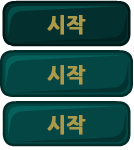
<style>
.page{position:relative;width:134px;height:150px;background:#044643}
.page>*{position:absolute;margin:0}
.t1{font:20px "NanumGothicExtraBold";color:#ab9a4a;font-weight:bold}
</style>
<div class="page">
<p class="t1" style="left:47px;top:15px;width:39px;height:20px">시작</p>
<p class="t1" style="left:47px;top:65px;width:39px;height:20px">시작</p>
<p class="t1" style="left:47px;top:115px;width:39px;height:20px">시작</p>
</div>
